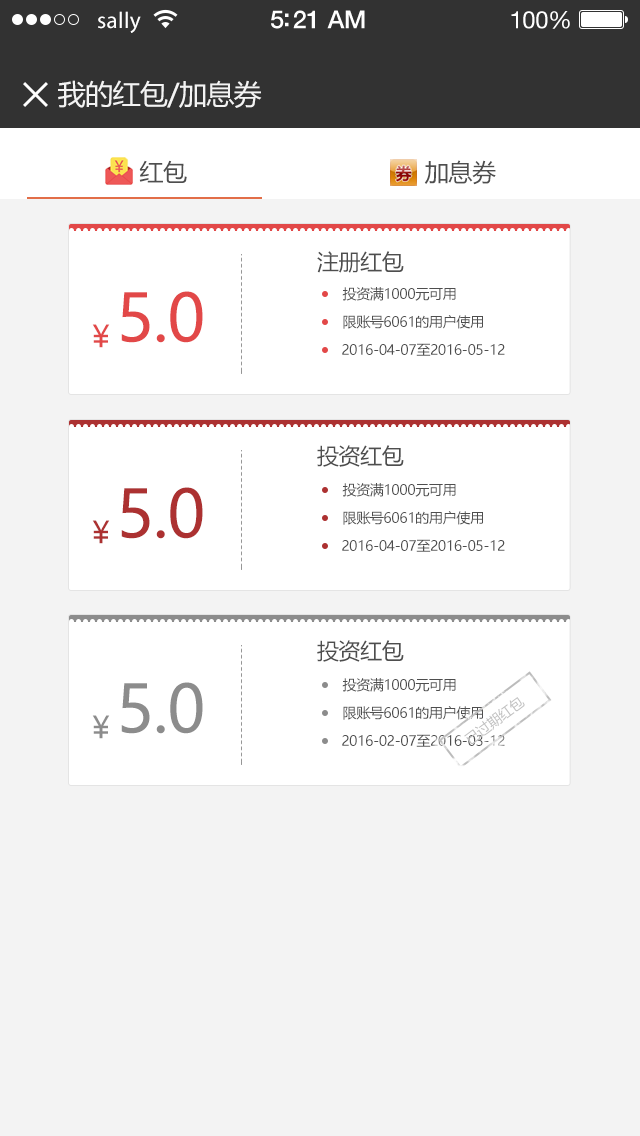
<style>
.page{position:relative;width:640px;height:1136px;background:#f3f3f3}
.page>*{position:absolute;margin:0}
.t1{font:23px "MyriadPro-Regular";letter-spacing:0.02em;color:#ffffff}
.t2{font:25px "HelveticaNeue-Medium";letter-spacing:-0.02em;color:#ffffff}
.t3{font:24px "HelveticaNeue";letter-spacing:-0.02em;color:#ffffff}
.t4{font:28px "MicrosoftYaHei";letter-spacing:-0.02em;color:#f3f3f3}
.t5{font:24px "MicrosoftYaHei";letter-spacing:-0.02em;color:#4e4e4e}
.t6{font:22px "MicrosoftYaHei";letter-spacing:-0.02em;color:#4e4e4e}
.t7{font:65px "MicrosoftYaHei";letter-spacing:-0.02em;color:#e24848}
.t8{font:14px "MicrosoftYaHei";letter-spacing:-0.02em;color:#4e4e4e}
.t9{font:30px "MicrosoftYaHei";letter-spacing:-0.02em;color:#e24848}
.t10{font:65px "MicrosoftYaHei";letter-spacing:-0.02em;color:#ac3131}
.t11{font:30px "MicrosoftYaHei";letter-spacing:-0.02em;color:#ac3131}
.t12{font:65px "MicrosoftYaHei";letter-spacing:-0.02em;color:#8c8c8c}
.t13{font:30px "MicrosoftYaHei";letter-spacing:-0.02em;color:#8c8c8c}
</style>
<div class="page">
<p class="t1" style="left:98px;top:11px;width:43px;height:22px">sally</p>
<p class="t2" style="left:271px;top:10px;width:94px;height:19px">5:21 AM</p>
<p class="t3" style="left:511px;top:11px;width:59px;height:18px">100%</p>
<p class="t4" style="left:58px;top:80px;width:204px;height:28px">我的红包/加息券</p>
<p class="t5" style="left:139px;top:160px;width:357px;height:25px">红包                                    加息券</p>
<p class="t6" style="left:317px;top:251px;width:87px;height:22px">注册红包</p>
<p class="t7" style="left:121px;top:291px;width:82px;height:52px">5.0</p>
<p class="t8" style="left:342px;top:287px;width:114px;height:14px">投资满1000元可用</p>
<p class="t8" style="left:343px;top:315px;width:140px;height:14px">限账号6061的用户使用</p>
<p class="t9" style="left:92px;top:324px;width:18px;height:24px">￥</p>
<p class="t8" style="left:342px;top:343px;width:163px;height:13px">2016-04-07至2016-05-12</p>
<p class="t6" style="left:317px;top:445px;width:87px;height:22px">投资红包</p>
<p class="t8" style="left:342px;top:483px;width:114px;height:14px">投资满1000元可用</p>
<p class="t10" style="left:121px;top:487px;width:82px;height:52px">5.0</p>
<p class="t11" style="left:92px;top:520px;width:18px;height:24px">￥</p>
<p class="t8" style="left:343px;top:511px;width:140px;height:14px">限账号6061的用户使用</p>
<p class="t8" style="left:342px;top:539px;width:163px;height:13px">2016-04-07至2016-05-12</p>
<p class="t6" style="left:317px;top:640px;width:87px;height:22px">投资红包</p>
<p class="t8" style="left:342px;top:678px;width:114px;height:14px">投资满1000元可用</p>
<p class="t12" style="left:121px;top:682px;width:82px;height:52px">5.0</p>
<p class="t8" style="left:343px;top:706px;width:140px;height:14px">限账号6061的用户使用</p>
<p class="t13" style="left:92px;top:715px;width:18px;height:24px">￥</p>
<p class="t8" style="left:342px;top:734px;width:163px;height:13px">2016-02-07至2016-03-12</p>
</div>
